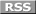
<style>
.page{position:relative;width:36px;height:14px}
.page>*{position:absolute;margin:0}
.t1{font:11px "Tahoma-Bold";color:#ffffff;scale:1.2 1}
</style>
<div class="page">
<p class="t1" style="left:5px;top:2px;width:26px;height:10px">RSS</p>
</div>
